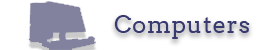
<style>
.page{position:relative;width:273px;height:50px;background:#ffffff}
.page>*{position:absolute;margin:0}
.t1{font:24px "Arvo";letter-spacing:0.02em;color:#37396f}
</style>
<div class="page">
<p class="t1" style="left:114px;top:15px;width:136px;height:24px">Computers</p>
</div>
